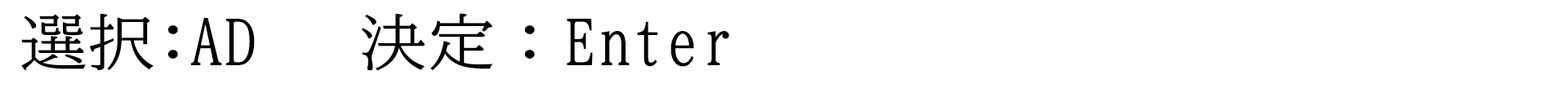
<style>
.page{position:relative;width:1568px;height:88px;background:#ffffff}
.page>*{position:absolute;margin:0}
.t1{font:61.2px "BIZ-UDMincho-Medium";color:#000000;scale:1.11 1}
</style>
<div class="page">
<p class="t1" style="left:21px;top:13px;width:708px;height:58px">選択:AD   決定：Enter</p>
</div>
